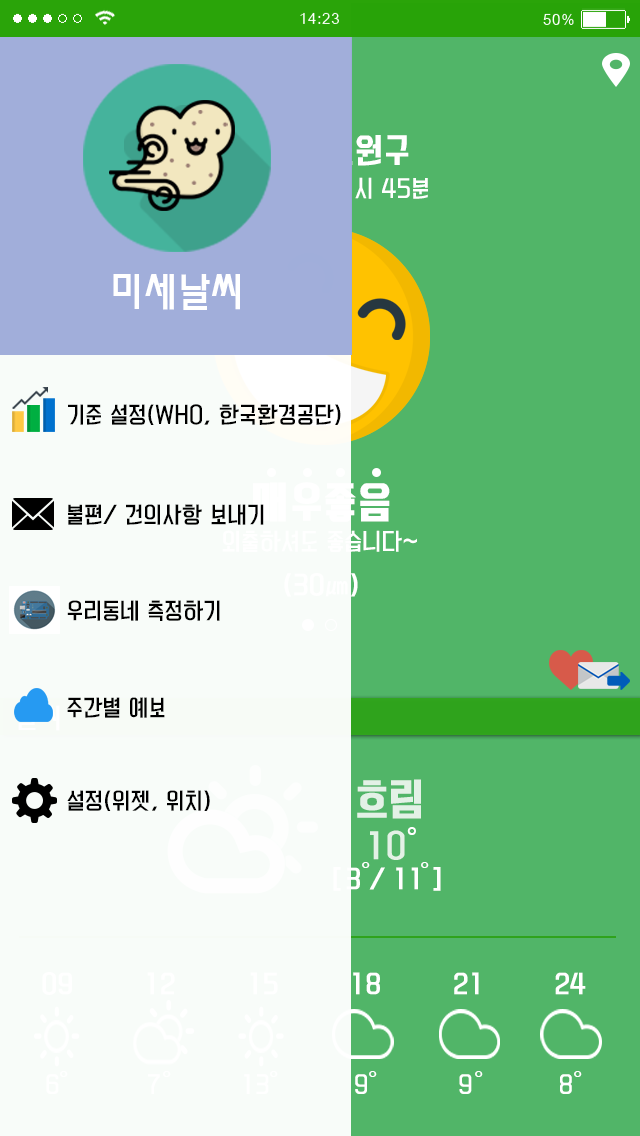
<style>
.page{position:relative;width:640px;height:1136px;background:#51b568}
.page>*{position:absolute;margin:0}
.t1{font:32px "KoreanYNMYT-B";letter-spacing:0.025em}
.t2{font:22px "KoreanYNMYT-L";letter-spacing:0.025em}
.t3{font:40px "MoeumTR-HM";letter-spacing:0.025em;color:#ffffff}
.t4{font:21px "KoreanYNMYT-L";letter-spacing:0.025em;color:#000000}
.t5{font:40px "KoreanYNMYT-B";letter-spacing:0.025em;color:#ffffff;font-weight:bold}
.t6{font:22px "KoreanYNMYT-L";letter-spacing:0.025em;color:#ffffff}
.t7{font:40px "KoreanYNMYT-M";color:#e3f1e6;font-weight:bold}
.t8{font:31px "KoreanYNMYT-M";color:#e3f1e6}
.t9{font:32.1px "MoeumTR-HM";color:#ffffff}
.t10{font:24px "KoreanYNMYT-M";color:#ffffff}
.t11{font:28px "MoeumTR-HM";color:#ffffff}
</style>
<div class="page">
<p class="t1" style="left:234px;top:135px;width:175px;height:31px">서울시 노원구</p>
<p class="t2" style="left:214px;top:177px;width:214px;height:22px">11월 20일 11시 45분</p>
<p class="t3" style="left:113px;top:274px;width:127px;height:36px">미세날씨</p>
<p class="t4" style="left:68px;top:404px;width:273px;height:21px">기준 설정(WHO, 한국환경공단)</p>
<p class="t5" style="left:253px;top:482px;width:137px;height:40px">매우좋음</p>
<p class="t4" style="left:68px;top:504px;width:196px;height:21px">불편/ 건의사항 보내기</p>
<p class="t6" style="left:222px;top:530px;width:195px;height:22px">외출하셔도 좋습니다~</p>
<p class="t4" style="left:67px;top:600px;width:153px;height:21px">우리동네 측정하기</p>
<p class="t4" style="left:67px;top:697px;width:98px;height:21px">주간별 예보</p>
<p class="t7" style="left:357px;top:779px;width:64px;height:40px">흐림</p>
<p class="t4" style="left:67px;top:790px;width:143px;height:21px">설정(위젯, 위치)</p>
<p class="t8" style="left:370px;top:830px;width:35px;height:30px">10</p>
<p class="t9" style="left:407px;top:827px;width:9px;height:8px">°</p>
<p class="t10" style="left:333px;top:867px;width:108px;height:24px">[ 3 / 11 ]</p>
<p class="t11" style="left:362px;top:862px;width:8px;height:6px">°</p>
<p class="t11" style="left:421px;top:862px;width:8px;height:6px">°</p>
<p class="t11" style="left:60px;top:1071px;width:8px;height:6px">°</p>
<p class="t11" style="left:163px;top:1071px;width:8px;height:6px">°</p>
<p class="t11" style="left:270px;top:1071px;width:8px;height:6px">°</p>
<p class="t11" style="left:369px;top:1071px;width:8px;height:6px">°</p>
<p class="t11" style="left:475px;top:1071px;width:8px;height:6px">°</p>
<p class="t11" style="left:574px;top:1071px;width:8px;height:6px">°</p>
</div>
